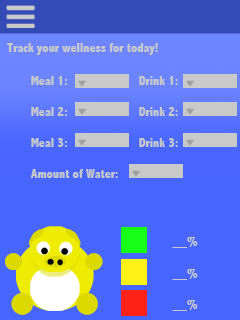
<style>
.page{position:relative;width:240px;height:320px;background:#4765ff}
.page>*{position:absolute;margin:0}
.t1{font:12.9px "AbadiMT-CondensedExtraBold";color:#c9c9c9}
</style>
<div class="page">
<p class="t1" style="left:7px;top:43px;width:151px;height:12px">Track your wellness for today!</p>
<p class="t1" style="left:30px;top:76px;width:148px;height:102px;text-align:justify">Meal 1:  Drink 1:<br><br>Meal 2:  Drink 2:<br><br>Meal 3:  Drink 3:<br><br>Amount of Water:</p>
</div>
